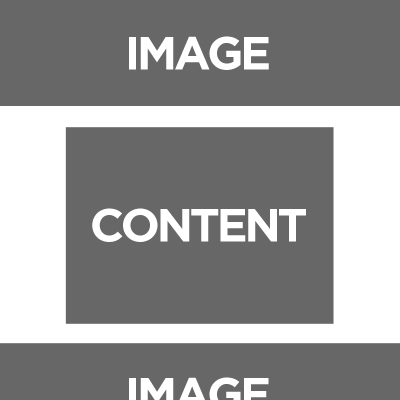
<style>
.page{position:relative;width:400px;height:400px;background:#676767}
.page>*{position:absolute;margin:0}
.t1{font:46.5px "Gotham-Bold";letter-spacing:-0.075em;color:#ffffff}
</style>
<div class="page">
<p class="t1" style="left:129px;top:36px;width:140px;height:34px">IMAGE</p>
<p class="t1" style="left:92px;top:208px;width:214px;height:34px">CONTENT</p>
</div>
